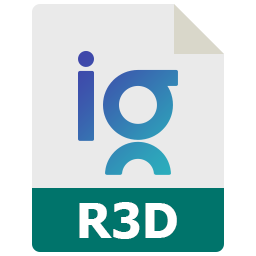
<style>
.page{position:relative;width:256px;height:256px;background:#eaeaea}
.page>*{position:absolute;margin:0}
.t1{font:48px "Tahoma-Bold";color:#ffffff}
</style>
<div class="page">
<p class="t1" style="left:79px;top:202px;width:98px;height:37px">R3D</p>
</div>
